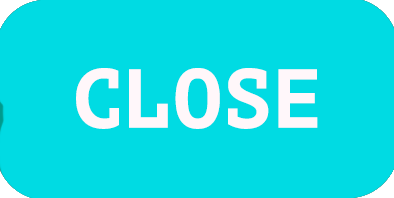
<style>
.page{position:relative;width:394px;height:198px;background:#00dbe3}
.page>*{position:absolute;margin:0}
.t1{font:83.3px "PTMono-Bold";color:#fff7fa}
</style>
<div class="page">
<p class="t1" style="left:76px;top:68px;width:242px;height:61px">CLOSE</p>
</div>
